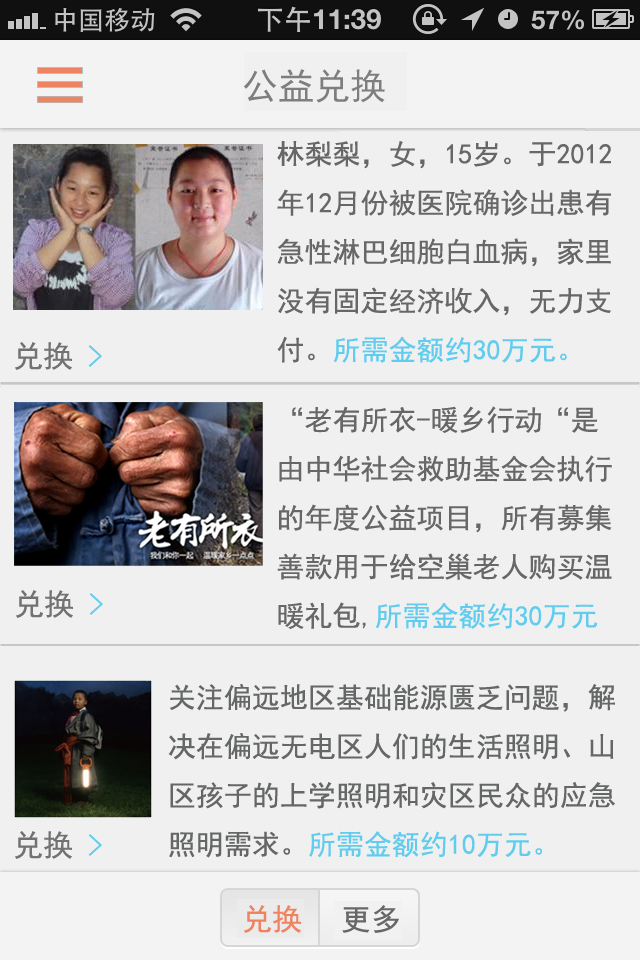
<style>
.page{position:relative;width:640px;height:960px;background:#f0f0f0}
.page>*{position:absolute;margin:0}
.t1{font:36px "SimHei";color:#7f7e7e}
.t2{font:28px "SimHei";color:#686767}
.t3{font:28px "SimHei";color:#61ccee}
.t4{font:30px "SimHei";color:#727272}
.t5{font:30px "SimHei";color:#61ccee}
.t6{font:28px "SimHei";color:#656666}
.t7{font:30px "SimHei";color:#ee8361}
.t8{font:30px "SimHei";color:#686767}
</style>
<div class="page">
<p class="t1" style="left:243px;top:69px;width:142px;height:34px">公益兑换</p>
<p class="t2" style="left:277px;top:141px;width:334px;height:222px">林梨梨，女，15岁。于2012年12月份被医院确诊出患有急性淋巴细胞白血病，家里没有固定经济收入，无力支付。<span class="t3">所需金额约30万元。</span></p>
<p class="t4" style="left:15px;top:342px;width:87px;height:28px">兑换 <span class="t5">&gt;</span></p>
<p class="t2" style="left:277px;top:406px;width:335px;height:223px">“老有所衣-暖乡行动“是由中华社会救助基金会执行的年度公益项目，所有募集善款用于给空巢老人购买温暖礼包,<span class="t3">所需金额约30万元。</span></p>
<p class="t4" style="left:16px;top:590px;width:87px;height:28px">兑换 <span class="t5">&gt;</span></p>
<p class="t6" style="left:168px;top:684px;width:447px;height:174px">关注偏远地区基础能源匮乏问题，解决在偏远无电区人们的生活照明、山区孩子的上学照明和灾区民众的应急照明需求。<span class="t3">所需金额约10万元。</span></p>
<p class="t4" style="left:15px;top:831px;width:87px;height:28px">兑换 <span class="t5">&gt;</span></p>
<p class="t7" style="left:244px;top:905px;width:57px;height:28px">兑换</p>
<p class="t8" style="left:342px;top:905px;width:57px;height:28px">更多</p>
</div>
